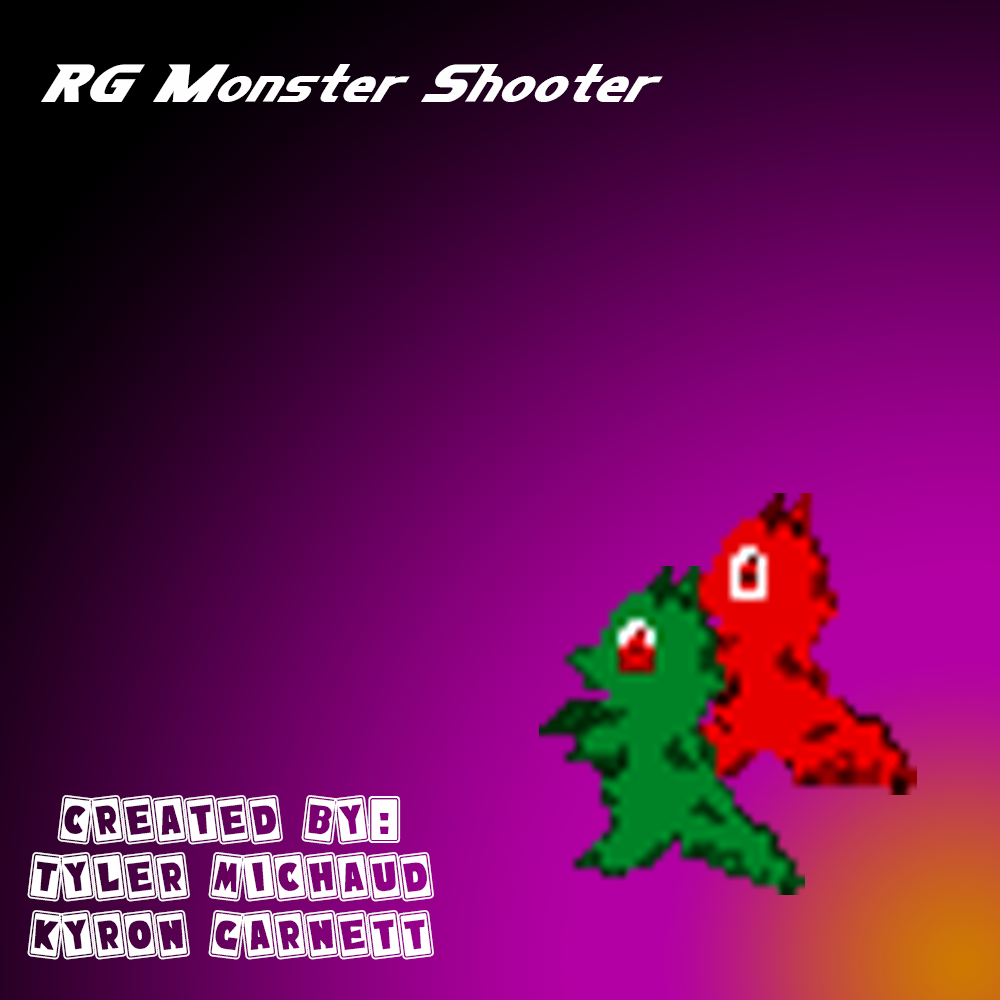
<style>
.page{position:relative;width:1000px;height:1000px}
.page>*{position:absolute;margin:0}
.t1{font:48px "NiseSonicBattle";color:#ffffff}
.t2{font:48px "NiseSonicShuffle";color:#ffffff}
</style>
<div class="page">
<p class="t1" style="left:41px;top:64px;width:622px;height:38px">RG Monster Shooter</p>
<p class="t2" style="left:27px;top:795px;width:407px;height:165px;text-align:center">Created By:<br>Tyler Michaud<br>Kyron Garnett</p>
</div>
